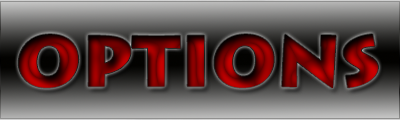
<style>
.page{position:relative;width:400px;height:120px}
.page>*{position:absolute;margin:0}
.t1{font:72px "LithosPro-Black"}
</style>
<div class="page">
<p class="t1" style="left:18px;top:34px;width:360px;height:54px">OPTIONS</p>
</div>
